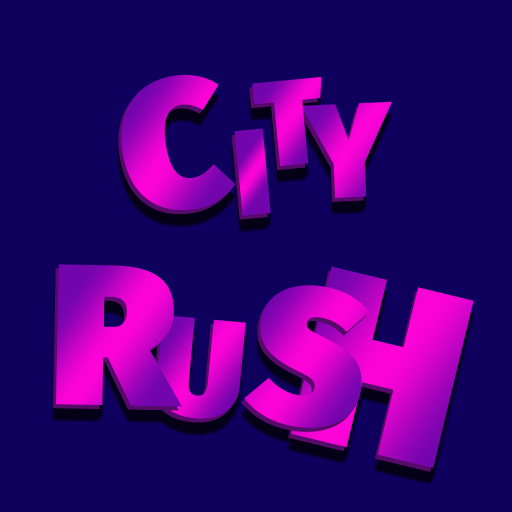
<style>
.page{position:relative;width:512px;height:512px;background:#0f005e}
.page>*{position:absolute;margin:0}
.t1{font:182.3px "FiraSans-Ultra"}
.t2{font:121.5px "FiraSans-Ultra"}
.t3{font:133.9px "FiraSans-Ultra"}
.t4{font:200.2px "FiraSans-Ultra"}
.t5{font:246.4px "FiraSans-Ultra"}
.t6{font:192.5px "FiraSans-Ultra"}
.t7{font:138.6px "FiraSans-Ultra"}
</style>
<div class="page">
<p class="t1" style="left:121px;top:74px;width:115px;height:137px;rotate:-9deg">C</p>
<p class="t2" style="left:252px;top:76px;width:70px;height:91px;rotate:-5deg">T</p>
<p class="t3" style="left:301px;top:101px;width:91px;height:97px;rotate:-2deg">Y</p>
<p class="t2" style="left:234px;top:128px;width:37px;height:88px;rotate:-5deg">I</p>
<p class="t4" style="left:56px;top:264px;width:126px;height:143px;rotate:1deg">R</p>
<p class="t5" style="left:291px;top:266px;width:183px;height:202px;rotate:14deg">H</p>
<p class="t6" style="left:244px;top:285px;width:126px;height:143px;rotate:8deg">S</p>
<p class="t7" style="left:156px;top:314px;width:90px;height:105px;rotate:5deg">U</p>
</div>
